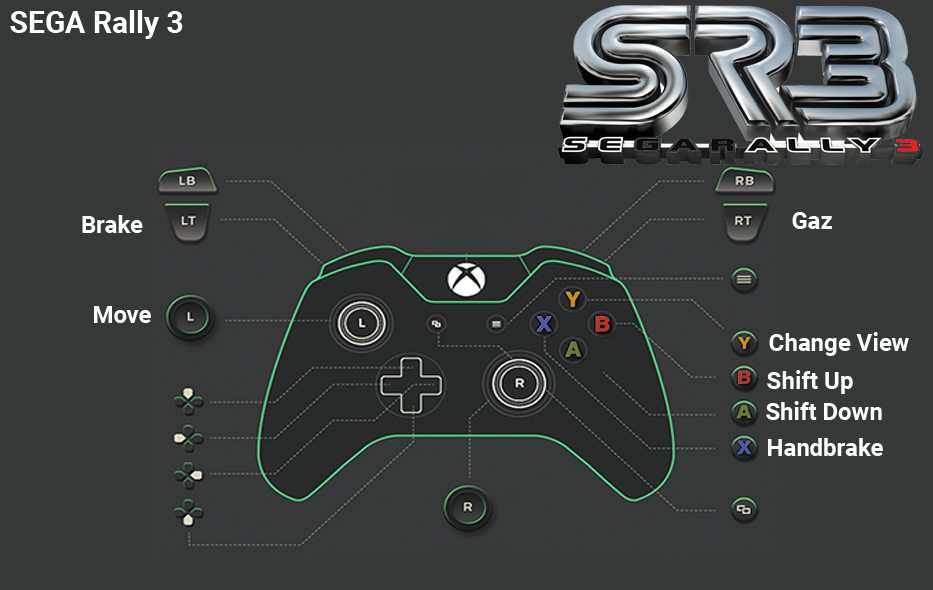
<style>
.page{position:relative;width:933px;height:590px;background:#363838}
.page>*{position:absolute;margin:0}
.t1{font:30px "Roboto-Bold";color:#ffffff}
.t2{font:24px "Roboto-Bold";color:#ffffff}
</style>
<div class="page">
<p class="t1" style="left:10px;top:10px;width:173px;height:29px">SEGA Rally 3</p>
<p class="t2" style="left:82px;top:215px;width:61px;height:18px">Brake</p>
<p class="t2" style="left:792px;top:212px;width:40px;height:17px">Gaz</p>
<p class="t2" style="left:94px;top:306px;width:57px;height:17px">Move</p>
<p class="t2" style="left:769px;top:332px;width:140px;height:24px">Change View</p>
<p class="t2" style="left:767px;top:370px;width:86px;height:24px">Shift Up</p>
<p class="t2" style="left:766px;top:401px;width:116px;height:19px">Shift Down</p>
<p class="t2" style="left:768px;top:438px;width:115px;height:18px">Handbrake</p>
</div>
